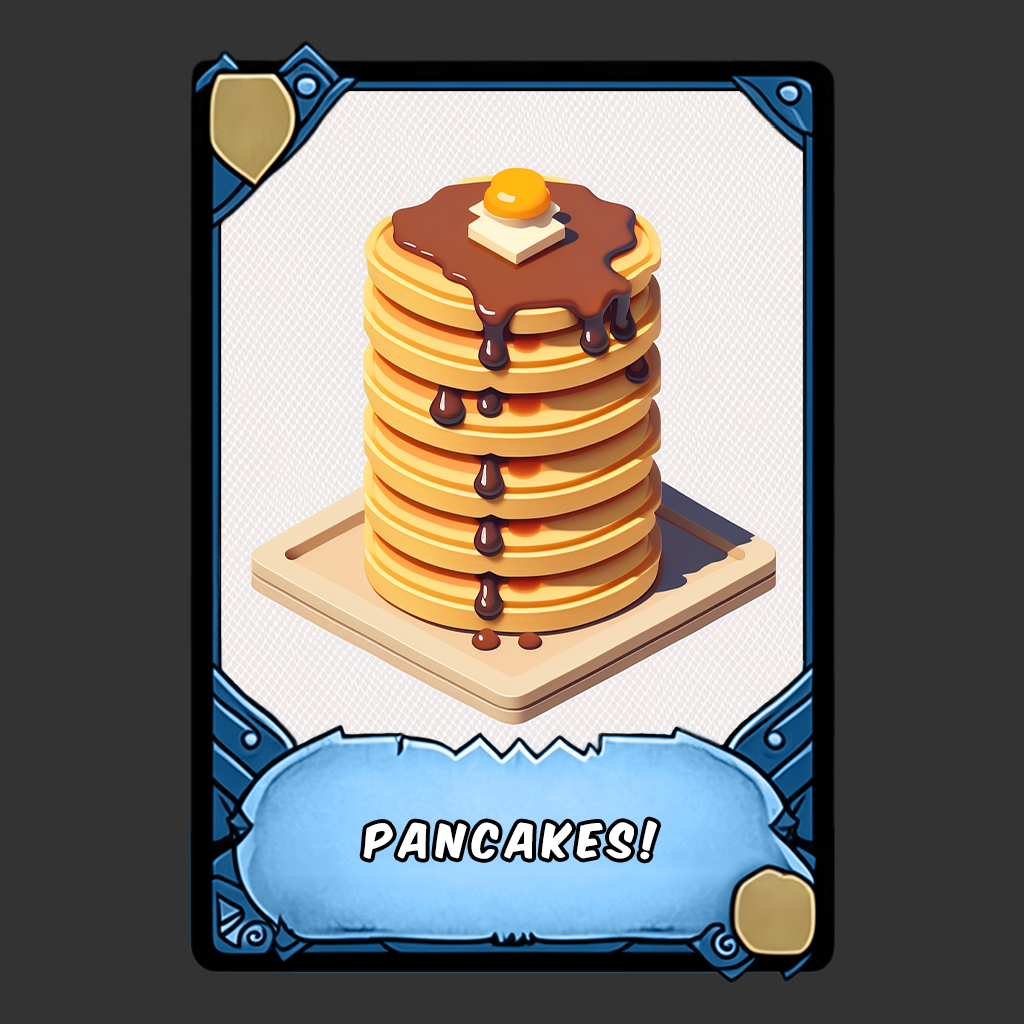
<style>
.page{position:relative;width:1024px;height:1024px;background:#333333}
.page>*{position:absolute;margin:0}
.t1{font:40px "KomikaAxis";letter-spacing:0.2em;color:#ffffff}
</style>
<div class="page">
<p class="t1" style="left:363px;top:820px;width:294px;height:40px">PANCAKES!</p>
</div>
